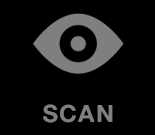
<style>
.page{position:relative;width:155px;height:135px;background:#000000}
.page>*{position:absolute;margin:0}
.t1{font:24px "AlteHaasGrotesk_Bold";letter-spacing:0.05em;color:#808080}
</style>
<div class="page">
<p class="t1" style="left:43px;top:104px;width:70px;height:19px">SCAN</p>
</div>
